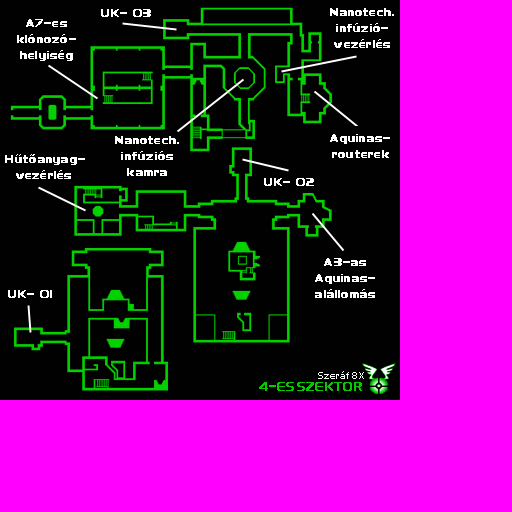
<style>
.page{position:relative;width:512px;height:512px;background:#000100}
.page>*{position:absolute;margin:0}
.t1{font:9.3px "DeusExConsole-Bold";letter-spacing:0.025em;color:#ffffff}
.t2{font:9.3px/16px "DeusExConsole-Bold";letter-spacing:0.025em;color:#ffffff}
.t3{font:9.3px/16px "DeusExConsole-Bold";letter-spacing:0.3em;color:#ffffff}
.t4{font:9.3px/16px "DeusExConsole-Bold";letter-spacing:0.004em;color:#ffffff}
</style>
<div class="page">
<p class="t1" style="left:101px;top:9px;width:50px;height:8px">UK- 03</p>
<p class="t2" style="left:330px;top:8px;width:64px;height:40px;text-align:center">Nanotech.<br>infúzió-<br>vezérlés</p>
<p class="t2" style="left:17px;top:19px;width:59px;height:42px;text-align:center">A7-es<br>klónozó-<br>helyiség</p>
<p class="t2" style="left:115px;top:136px;width:64px;height:40px;text-align:center">Nanotech.<br>infúziós<br>kamra</p>
<p class="t2" style="left:330px;top:134px;width:60px;height:24px;text-align:center">Aquinas-<br>routerek</p>
<p class="t2" style="left:5px;top:154px;width:80px;height:25px">H<span class="t3">ű</span><span class="t4">t</span>őanyag-<br>  vezérlés</p>
<p class="t1" style="left:264px;top:178px;width:50px;height:8px">UK- 02</p>
<p class="t2" style="left:315px;top:258px;width:60px;height:40px;text-align:center">A3-as<br>Aquinas-<br>alállomás</p>
<p class="t1" style="left:8px;top:290px;width:44px;height:8px">UK- 01</p>
</div>
